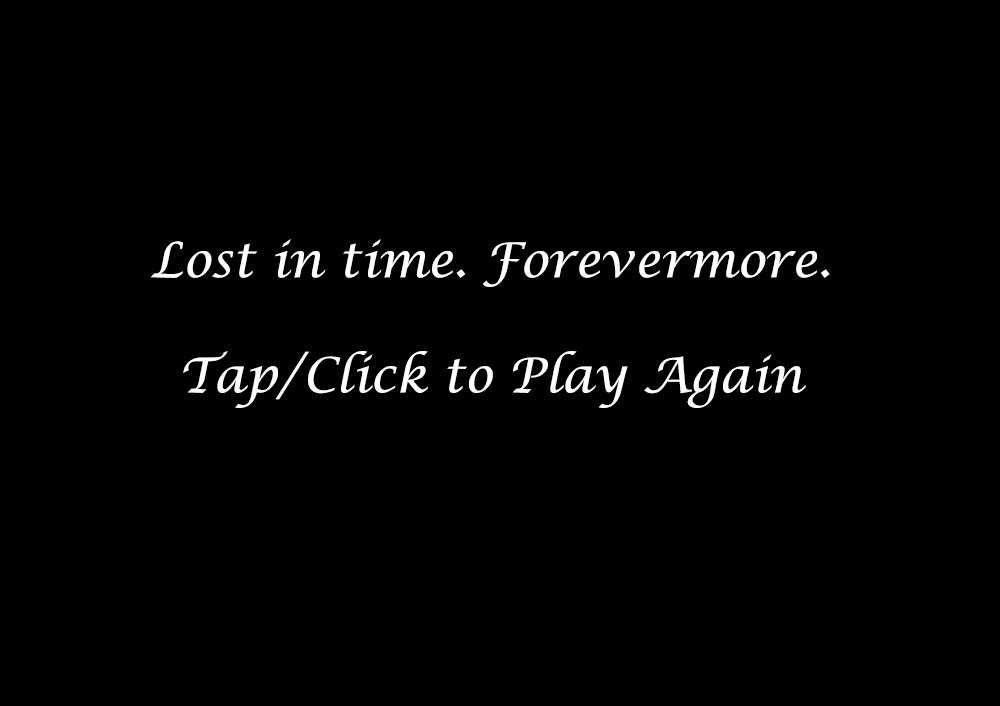
<style>
.page{position:relative;width:1000px;height:706px;background:#000000}
.page>*{position:absolute;margin:0}
.t1{font:48px "LucidaCalligraphy-Italic";color:#ffffff}
</style>
<div class="page">
<p class="t1" style="left:151px;top:239px;width:679px;height:169px;text-align:center">Lost in time. Forevermore.<br><br>Tap/Click to Play Again</p>
</div>
